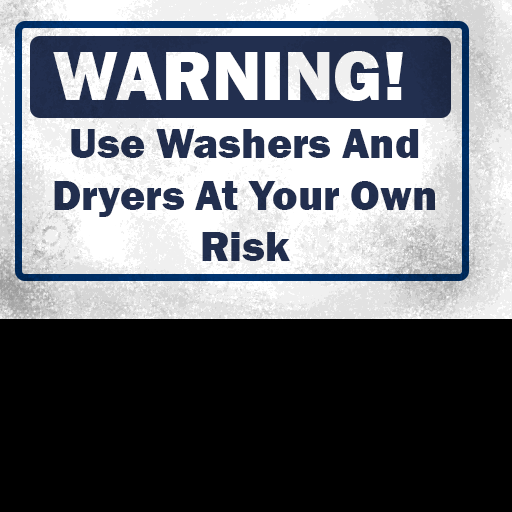
<style>
.page{position:relative;width:512px;height:512px;background:#000000}
.page>*{position:absolute;margin:0}
.t1{font:72px "FranklinGothic-Heavy";color:#ffffff}
.t2{font:43px "FranklinGothic-Heavy";color:#222f4f}
</style>
<div class="page">
<p class="t1" style="left:53px;top:51px;width:350px;height:50px">WARNING!</p>
<p class="t2" style="left:54px;top:129px;width:381px;height:132px;text-align:center">Use Washers And Dryers At Your Own Risk</p>
</div>
